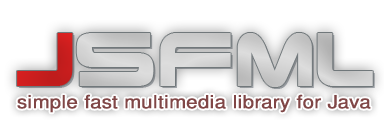
<style>
.page{position:relative;width:384px;height:120px;background:#ffffff}
.page>*{position:absolute;margin:0}
.t1{font:18px "FreeSans";color:#804646;font-weight:bold;scale:1.12 1}
</style>
<div class="page">
<p class="t1" style="left:17px;top:94px;width:354px;height:19px">simple fast multimedia library for Java</p>
</div>
